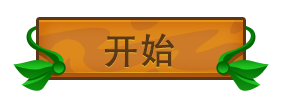
<style>
.page{position:relative;width:287px;height:103px;background:#ffffff}
.page>*{position:absolute;margin:0}
.t1{font:36px "AdobeHeitiStd-Regular";letter-spacing:0.025em;color:#5b3716}
</style>
<div class="page">
<p class="t1" style="left:105px;top:33px;width:70px;height:34px">开始</p>
</div>
